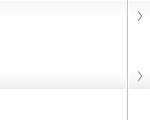
<style>
.page{position:relative;width:150px;height:120px;background:#ffffff}
.page>*{position:absolute;margin:0}
.t1{font:36px "HelveticaNeue-UltraLigCond";letter-spacing:-0.015em}
</style>
<div class="page">
<p class="t1" style="left:138px;top:11px;width:4px;height:11px">›</p>
<p class="t1" style="left:138px;top:71px;width:4px;height:11px">›</p>
</div>
